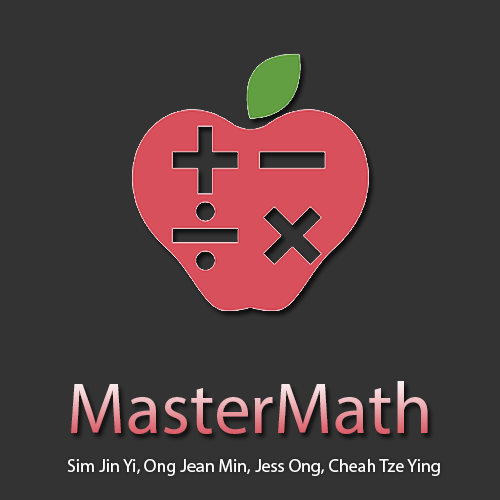
<style>
.page{position:relative;width:500px;height:500px;background:#333333}
.page>*{position:absolute;margin:0}
.t1{font:72.7px "MyriadPro-Regular"}
.t2{font:18px "MyriadPro-Regular";color:#ffffff}
</style>
<div class="page">
<p class="t1" style="left:71px;top:381px;width:357px;height:53px">MasterMath</p>
<p class="t2" style="left:67px;top:459px;width:373px;height:17px">Sim Jin Yi, Ong Jean Min, Jess Ong, Cheah Tze Ying</p>
</div>
